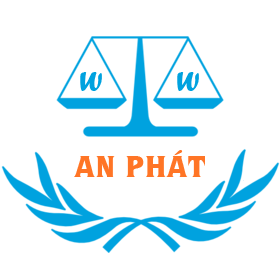
<style>
.page{position:relative;width:280px;height:280px;background:#ffffff}
.page>*{position:absolute;margin:0}
.t1{font:28.1px "ForteMT";letter-spacing:0.025em;color:#00a2df}
.t2{font:29.4px "UVNHuongQueNang";letter-spacing:0.025em;color:#ff7526}
</style>
<div class="page">
<p class="t1" style="left:80px;top:72px;width:22px;height:19px">W</p>
<p class="t1" style="left:177px;top:72px;width:22px;height:19px">W</p>
<p class="t2" style="left:74px;top:150px;width:131px;height:27px">AN PHÁT</p>
</div>
